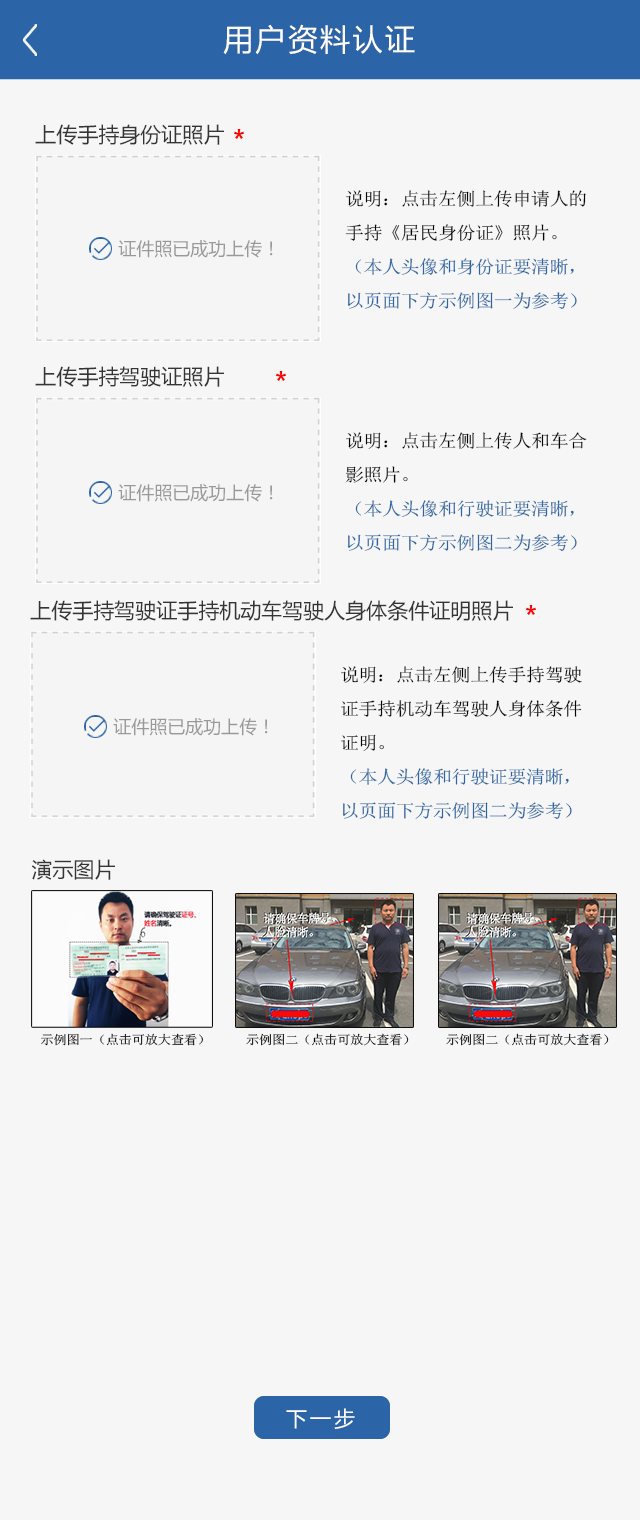
<style>
.page{position:relative;width:640px;height:1520px;background:#f6f6f6}
.page>*{position:absolute;margin:0}
.t1{font:30px "MicrosoftYaHei";letter-spacing:0.08em;color:#ffffff}
.t2{font:21px "MicrosoftYaHei";color:#353535}
.t3{font:18px/34px "SimSun";letter-spacing:-0.02em;color:#2b65a7;scale:1.06 1}
.t4{font:18px/34px "SimSun";letter-spacing:-0.02em;color:#060606;scale:1.06 1}
.t5{font:18px "MicrosoftYaHei";color:#999999}
.t6{font:12.6px "SimSun";letter-spacing:-0.02em;color:#000000;scale:1.06 1}
.t7{font:21px "MicrosoftYaHei";letter-spacing:0.14em;color:#ffffff}
</style>
<div class="page">
<p class="t1" style="left:223px;top:24px;width:192px;height:31px">用户资料认证</p>
<p class="t2" style="left:35px;top:124px;width:189px;height:21px">上传手持身份证照片</p>
<p class="t3" style="left:345px;top:190px;width:241px;height:119px"><span class="t4">说明：点击左侧上传申请人的手持《居民身份证》照片。<br></span>（本人头像和身份证要清晰，以页面下方示例图一为参考）</p>
<p class="t5" style="left:118px;top:240px;width:155px;height:18px">证件照已成功上传！</p>
<p class="t2" style="left:35px;top:366px;width:189px;height:21px">上传手持驾驶证照片</p>
<p class="t3" style="left:345px;top:432px;width:242px;height:119px"><span class="t4">说明：点击左侧上传人和车合影照片。<br></span>（本人头像和行驶证要清晰，以页面下方示例图二为参考）</p>
<p class="t5" style="left:118px;top:484px;width:155px;height:18px">证件照已成功上传！</p>
<p class="t2" style="left:30px;top:600px;width:483px;height:21px">上传手持驾驶证手持机动车驾驶人身体条件证明照片</p>
<p class="t4" style="left:341px;top:666px;width:241px;height:153px">说明：点击左侧上传手持驾驶证手持机动车驾驶人身体条件证明。<br><span class="t3">（本人头像和行驶证要清晰，以页面下方示例图二为参考）</span></p>
<p class="t5" style="left:113px;top:718px;width:155px;height:18px">证件照已成功上传！</p>
<p class="t2" style="left:31px;top:859px;width:84px;height:21px">演示图片</p>
<p class="t6" style="left:41px;top:1033px;width:162px;height:13px">示例图一（点击可放大查看）</p>
<p class="t6" style="left:246px;top:1033px;width:163px;height:13px">示例图二（点击可放大查看）</p>
<p class="t6" style="left:446px;top:1033px;width:163px;height:13px">示例图二（点击可放大查看）</p>
<p class="t7" style="left:286px;top:1408px;width:69px;height:21px">下一步</p>
</div>
